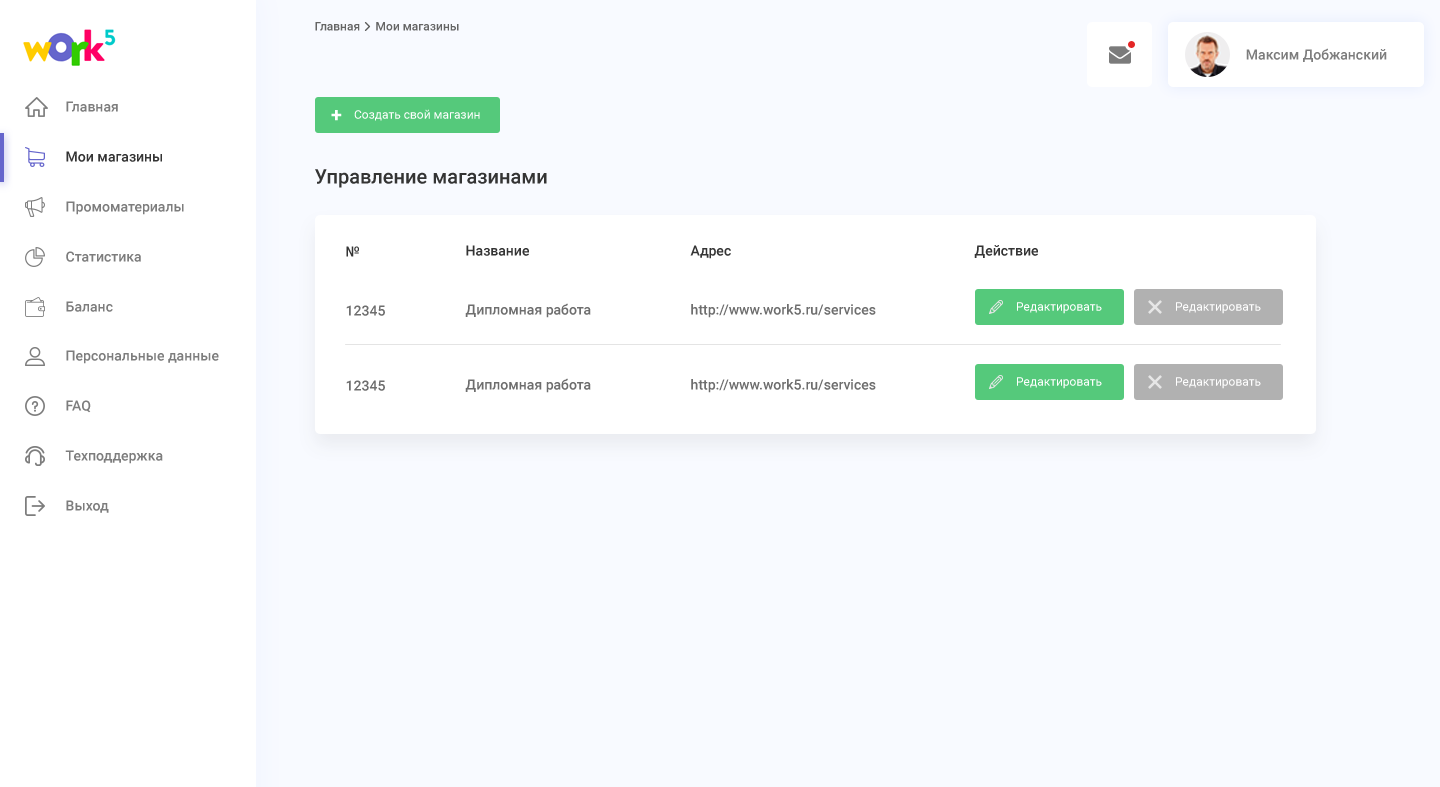
<style>
.page{position:relative;width:1440px;height:787px;background:#f8faff}
.page>*{position:absolute;margin:0}
.t1{font:12px "Roboto-Medium";color:#656565}
.t2{font:14px "Roboto-Medium";color:#7d7d7d}
.t3{font:20px "Roboto-Bold";color:#ffffff}
.t4{font:12px "Roboto-Regular";color:#ffffff}
.t5{font:14px "Roboto-Medium";color:#343434}
.t6{font:20px "Roboto-Medium";color:#343434}
.t7{font:14px "Roboto-Medium";color:#6e6e6e}
</style>
<div class="page">
<p class="t1" style="left:315px;top:22px;width:45px;height:9px">Главная</p>
<p class="t1" style="left:376px;top:22px;width:83px;height:9px">Мои магазины</p>
<p class="t2" style="left:1246px;top:48px;width:141px;height:14px">Максим Добжанский</p>
<p class="t2" style="left:66px;top:101px;width:52px;height:11px">Главная</p>
<p class="t3" style="left:331px;top:110px;width:11px;height:11px">+</p>
<p class="t4" style="left:354px;top:109px;width:126px;height:12px">Создать свой магазин</p>
<p class="t5" style="left:66px;top:151px;width:96px;height:11px">Мои магазины</p>
<p class="t6" style="left:315px;top:169px;width:232px;height:19px">Управление магазинами</p>
<p class="t2" style="left:66px;top:201px;width:118px;height:14px">Промоматериалы</p>
<p class="t5" style="left:346px;top:246px;width:13px;height:11px">№</p>
<p class="t5" style="left:466px;top:245px;width:63px;height:11px">Название</p>
<p class="t5" style="left:690px;top:245px;width:41px;height:14px">Адрес</p>
<p class="t5" style="left:974px;top:245px;width:64px;height:13px">Действие</p>
<p class="t2" style="left:66px;top:251px;width:75px;height:11px">Статистика</p>
<p class="t2" style="left:66px;top:301px;width:47px;height:11px">Баланс</p>
<p class="t7" style="left:346px;top:305px;width:39px;height:11px">12345</p>
<p class="t7" style="left:465px;top:303px;width:126px;height:15px">Дипломная работа</p>
<p class="t7" style="left:691px;top:304px;width:185px;height:14px">http://www.work5.ru/services</p>
<p class="t4" style="left:1017px;top:302px;width:85px;height:12px">Редактировать</p>
<p class="t4" style="left:1176px;top:302px;width:85px;height:12px">Редактировать</p>
<p class="t2" style="left:66px;top:350px;width:153px;height:14px">Персональные данные</p>
<p class="t4" style="left:1017px;top:377px;width:85px;height:12px">Редактировать</p>
<p class="t4" style="left:1176px;top:377px;width:85px;height:12px">Редактировать</p>
<p class="t7" style="left:346px;top:380px;width:39px;height:11px">12345</p>
<p class="t7" style="left:465px;top:378px;width:126px;height:15px">Дипломная работа</p>
<p class="t7" style="left:691px;top:379px;width:185px;height:14px">http://www.work5.ru/services</p>
<p class="t2" style="left:66px;top:400px;width:25px;height:13px">FAQ</p>
<p class="t2" style="left:65px;top:450px;width:98px;height:14px">Техподдержка</p>
<p class="t2" style="left:66px;top:500px;width:43px;height:13px">Выход</p>
</div>
